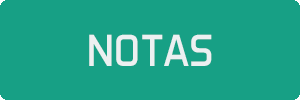
<style>
.page{position:relative;width:300px;height:100px;background:#17a085}
.page>*{position:absolute;margin:0}
.t1{font:45.8px "AeroMaticsRegular";color:#ecf0f1}
</style>
<div class="page">
<p class="t1" style="left:89px;top:34px;width:123px;height:32px">NOTAS</p>
</div>
